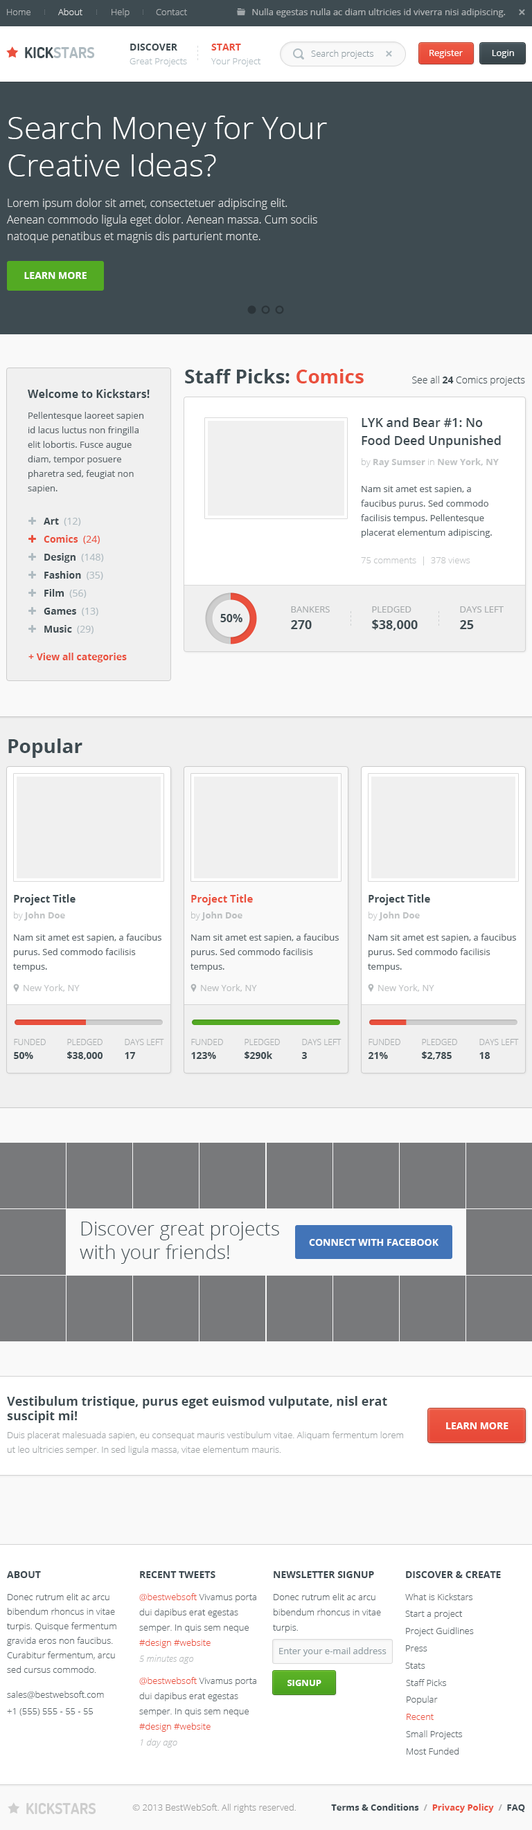
<style>
.page{position:relative;width:532px;height:1830px;background:#ffffff}
.page>*{position:absolute;margin:0}
.t1{font:9px "OpenSans-Light";color:#b0b4b6}
.t2{font:9px "OpenSans-Light";color:#e1e3e3}
.t3{font:9px "OpenSans";color:#b0b4b6}
.t4{font:15.2px "Dosis-Bold";color:#afbbc1;text-transform:uppercase}
.t5{font:15.2px "Dosis-Bold";color:#3e4b51;text-transform:uppercase}
.t6{font:9.7px "OpenSans-Bold";color:#3e4b51;text-transform:uppercase}
.t7{font:9.7px "OpenSans-Bold";color:#ea503d;text-transform:uppercase}
.t8{font:9px "OpenSans-Light";color:#909da3}
.t9{font:9px "OpenSans";color:#ffffff}
.t10{font:9px "OpenSans-Light";color:#afbbc1}
.t11{font:31.2px "OpenSans-Light";color:#ffffff}
.t12{font:11.1px/16.6px "OpenSans-Light";color:#e1e3e3}
.t13{font:9.7px "OpenSans-Bold";color:#ffffff;text-transform:uppercase}
.t14{font:19.4px "OpenSans-Bold";color:#3e4b51}
.t15{font:19.4px "OpenSans-Bold";color:#ea503d}
.t16{font:9.7px "OpenSans-Light";color:#3e4b51}
.t17{font:9.7px "OpenSans-Bold";color:#3e4b51}
.t18{font:11.1px "OpenSans-Bold";color:#3e4b51}
.t19{font:9px/14.5px "OpenSans";color:#5c666b}
.t20{font:12.5px/18px "OpenSans-Semibold";color:#3e4b51}
.t21{font:9px "OpenSans-Bold";color:#c1c4c5}
.t22{font:9px "OpenSans-Light";color:#c1c4c5}
.t23{font:9.7px "OpenSans";color:#afbbc1}
.t24{font:9.7px "OpenSans-Bold";color:#ea503d}
.t25{font:9.7px "OpenSans";color:#ea503d}
.t26{font:9px "OpenSans";color:#a6aaac;text-transform:uppercase}
.t27{font:12.5px "OpenSans-Bold";color:#3e4b51}
.t28{font:10.4px "OpenSans-Bold";color:#3e4b51}
.t29{font:10.4px "OpenSans-Bold";color:#ea503d}
.t30{font:9px "OpenSans-Bold";color:#bdc0c1}
.t31{font:9px "OpenSans-Light";color:#bdc0c1}
.t32{font:9px "OpenSans";color:#c1c4c5}
.t33{font:9px "OpenSans";color:#bdc0c1}
.t34{font:8.3px "OpenSans-Light";color:#a6aaac;text-transform:uppercase}
.t35{font:19.4px "OpenSans-Light";color:#3e4b51}
.t36{font:9px/14.5px "OpenSans-Light";color:#9da2a4}
.t37{font:9.7px "OpenSans-Bold";color:#3e4a51;text-transform:uppercase}
.t38{font:9px/14.5px "OpenSans-Light";color:#5c666b}
.t39{font:9px/15.2px "OpenSans-Light";color:#5c666b}
.t40{font:9px/15.2px "OpenSans-Light";color:#ea503d}
.t41{font:9px "OpenSans-Light";color:#5c666b}
.t42{font:9px "OpenSans";color:#909da3}
.t43{font:9px "OpenSansLight-Italic";color:#b9bcbe}
.t44{font:9px "OpenSans-Bold";color:#ffffff;text-transform:uppercase}
.t45{font:9px "OpenSans-Light";color:#ea503d}
.t46{font:15.2px "Dosis-Bold";color:#cecece;text-transform:uppercase}
.t47{font:9px "OpenSans-Light";color:#999999}
.t48{font:9px "OpenSans-Bold";color:#3e4a51}
.t49{font:9px "OpenSans-Bold";color:#aeaeae}
.t50{font:9px "OpenSans-Bold";color:#ea503d}
</style>
<div class="page">
<p class="t1" style="left:7px;top:9px;width:23px;height:6px">Home</p>
<p class="t2" style="left:58px;top:8px;width:24px;height:7px">About</p>
<p class="t1" style="left:111px;top:8px;width:18px;height:9px">Help</p>
<p class="t1" style="left:156px;top:9px;width:31px;height:6px">Contact</p>
<p class="t3" style="left:252px;top:8px;width:253px;height:9px">Nulla egestas nulla ac diam ultricies id viverra nisi adipiscing.</p>
<p class="t4" style="left:25px;top:47px;width:70px;height:11px"><span class="t5">Kick</span>stars</p>
<p class="t6" style="left:130px;top:44px;width:47px;height:7px">Discover</p>
<p class="t7" style="left:211px;top:44px;width:30px;height:7px">Start</p>
<p class="t8" style="left:311px;top:50px;width:62px;height:9px">Search projects</p>
<p class="t9" style="left:429px;top:50px;width:33px;height:8px">Register</p>
<p class="t9" style="left:492px;top:50px;width:22px;height:8px">Login</p>
<p class="t10" style="left:129px;top:58px;width:58px;height:8px">Great Projects</p>
<p class="t10" style="left:211px;top:58px;width:50px;height:8px">Your Project</p>
<p class="t11" style="left:8px;top:116px;width:319px;height:61px">Search Money for Your Creative Ideas?</p>
<p class="t12" style="left:7px;top:198px;width:310px;height:45px">Lorem ipsum dolor sit amet, consectetuer adipiscing elit. Aenean commodo ligula eget dolor. Aenean massa. Cum sociis natoque penatibus et magnis dis parturient monte.</p>
<p class="t13" style="left:24px;top:272px;width:63px;height:7px">Learn More</p>
<p class="t14" style="left:185px;top:369px;width:178px;height:15px">Staff Picks: <span class="t15">Comics</span></p>
<p class="t16" style="left:412px;top:376px;width:113px;height:10px">See all <span class="t17">24</span> Comics projects</p>
<p class="t18" style="left:28px;top:389px;width:122px;height:9px">Welcome to Kickstars!</p>
<p class="t19" style="left:28px;top:412px;width:116px;height:82px">Pellentesque laoreet sapien id lacus luctus non fringilla elit lobortis. Fusce augue diam, tempor posuere pharetra sed, feugiat non sapien.</p>
<p class="t20" style="left:361px;top:417px;width:140px;height:31px">LYK and Bear #1: No Food Deed Unpunished</p>
<p class="t21" style="left:361px;top:458px;width:137px;height:9px"><span class="t22">by </span>Ray Sumser<span class="t22"> in </span>New York, NY</p>
<p class="t19" style="left:361px;top:486px;width:131px;height:52px">Nam sit amet est sapien, a faucibus purus. Sed commodo facilisis tempus. Pellentesque placerat elementum adipiscing.</p>
<p class="t23" style="left:44px;top:518px;width:37px;height:8px"><span class="t17">Art </span> (12)</p>
<p class="t24" style="left:44px;top:535px;width:56px;height:9px">Comics <span class="t25"> (24)</span></p>
<p class="t17" style="left:44px;top:553px;width:60px;height:10px">Design <span class="t23"> (148)</span></p>
<p class="t22" style="left:361px;top:557px;width:109px;height:9px">75 comments  |  378 views</p>
<p class="t17" style="left:44px;top:571px;width:59px;height:9px">Fashion <span class="t23"> (35)</span></p>
<p class="t17" style="left:44px;top:589px;width:43px;height:9px">Film <span class="t23"> (56)</span></p>
<p class="t17" style="left:44px;top:608px;width:54px;height:8px">Games <span class="t23"> (13)</span></p>
<p class="t18" style="left:220px;top:614px;width:22px;height:8px">50%</p>
<p class="t26" style="left:291px;top:606px;width:39px;height:7px">Bankers</p>
<p class="t26" style="left:372px;top:606px;width:39px;height:7px">Pledged</p>
<p class="t26" style="left:460px;top:606px;width:43px;height:7px">Days Left</p>
<p class="t17" style="left:44px;top:625px;width:49px;height:9px">Music <span class="t23"> (29)</span></p>
<p class="t27" style="left:291px;top:620px;width:21px;height:9px">270</p>
<p class="t27" style="left:372px;top:620px;width:45px;height:11px">$38,000</p>
<p class="t27" style="left:460px;top:620px;width:14px;height:9px">25</p>
<p class="t24" style="left:28px;top:653px;width:99px;height:10px">+ View all categories</p>
<p class="t14" style="left:8px;top:739px;width:74px;height:19px">Popular</p>
<p class="t28" style="left:14px;top:894px;width:61px;height:12px">Project Title</p>
<p class="t29" style="left:191px;top:894px;width:62px;height:12px">Project Title</p>
<p class="t28" style="left:368px;top:894px;width:62px;height:12px">Project Title</p>
<p class="t21" style="left:14px;top:912px;width:51px;height:9px"><span class="t22">by </span>John Doe</p>
<p class="t30" style="left:191px;top:912px;width:51px;height:9px"><span class="t31">by </span>John Doe</p>
<p class="t21" style="left:368px;top:912px;width:52px;height:9px"><span class="t22">by </span>John Doe</p>
<p class="t19" style="left:13px;top:934px;width:148px;height:38px">Nam sit amet est sapien, a faucibus purus. Sed commodo facilisis tempus.</p>
<p class="t19" style="left:190px;top:934px;width:149px;height:38px">Nam sit amet est sapien, a faucibus purus. Sed commodo facilisis tempus.</p>
<p class="t19" style="left:368px;top:934px;width:148px;height:38px">Nam sit amet est sapien, a faucibus purus. Sed commodo facilisis tempus.</p>
<p class="t32" style="left:24px;top:984px;width:56px;height:8px">New York, NY</p>
<p class="t33" style="left:201px;top:984px;width:56px;height:8px">New York, NY</p>
<p class="t32" style="left:378px;top:984px;width:56px;height:8px">New York, NY</p>
<p class="t34" style="left:14px;top:1039px;width:32px;height:6px">Funded</p>
<p class="t34" style="left:67px;top:1039px;width:35px;height:6px">Pledged</p>
<p class="t34" style="left:125px;top:1039px;width:39px;height:6px">Days Left</p>
<p class="t34" style="left:191px;top:1039px;width:32px;height:6px">Funded</p>
<p class="t34" style="left:244px;top:1039px;width:36px;height:6px">Pledged</p>
<p class="t34" style="left:302px;top:1039px;width:39px;height:6px">Days Left</p>
<p class="t34" style="left:368px;top:1039px;width:32px;height:6px">Funded</p>
<p class="t34" style="left:422px;top:1039px;width:35px;height:6px">Pledged</p>
<p class="t34" style="left:479px;top:1039px;width:40px;height:6px">Days Left</p>
<p class="t17" style="left:14px;top:1052px;width:19px;height:7px">50%</p>
<p class="t17" style="left:67px;top:1052px;width:36px;height:8px">$38,000</p>
<p class="t17" style="left:125px;top:1052px;width:11px;height:7px">17</p>
<p class="t17" style="left:191px;top:1052px;width:25px;height:7px">123%</p>
<p class="t17" style="left:244px;top:1052px;width:28px;height:7px">$290k</p>
<p class="t17" style="left:301px;top:1052px;width:6px;height:7px">3</p>
<p class="t17" style="left:368px;top:1052px;width:20px;height:7px">21%</p>
<p class="t17" style="left:422px;top:1052px;width:29px;height:8px">$2,785</p>
<p class="t17" style="left:479px;top:1052px;width:11px;height:7px">18</p>
<p class="t35" style="left:80px;top:1222px;width:199px;height:42px">Discover great projects with your friends!</p>
<p class="t13" style="left:309px;top:1239px;width:129px;height:7px">Connect With Facebook</p>
<p class="t27" style="left:7px;top:1396px;width:380px;height:27px">Vestibulum tristique, purus eget euismod vulputate, nisl erat suscipit mi!</p>
<p class="t36" style="left:7px;top:1432px;width:396px;height:23px">Duis placerat malesuada sapien, eu consequat mauris vestibulum vitae. Aliquam fermentum lorem ut leo ultricies semper. In sed ligula massa, vitae elementum mauris.</p>
<p class="t13" style="left:446px;top:1423px;width:62px;height:7px">Learn More</p>
<p class="t37" style="left:7px;top:1572px;width:34px;height:6px">About</p>
<p class="t37" style="left:140px;top:1572px;width:75px;height:6px">Recent Tweets</p>
<p class="t37" style="left:273px;top:1572px;width:101px;height:6px">Newsletter Signup</p>
<p class="t37" style="left:406px;top:1572px;width:95px;height:6px">Discover &amp; Create</p>
<p class="t38" style="left:7px;top:1594px;width:109px;height:79px">Donec rutrum elit ac arcu bibendum rhoncus in vitae turpis. Quisque fermentum gravida eros non faucibus. Curabitur fermentum, arcu sed cursus commodo.</p>
<p class="t39" style="left:139px;top:1594px;width:117px;height:54px"><span class="t40">@bestwebsoft</span> Vivamus porta dui dapibus erat egestas semper. In quis sem neque <span class="t40">#design #website</span></p>
<p class="t39" style="left:273px;top:1594px;width:108px;height:39px">Donec rutrum elit ac arcu bibendum rhoncus in vitae turpis.</p>
<p class="t41" style="left:405px;top:1594px;width:67px;height:7px">What is Kickstars</p>
<p class="t41" style="left:405px;top:1611px;width:57px;height:8px">Start a project</p>
<p class="t41" style="left:406px;top:1628px;width:68px;height:9px">Project Guidlines</p>
<p class="t42" style="left:279px;top:1648px;width:107px;height:9px">Enter your e-mail address</p>
<p class="t41" style="left:406px;top:1646px;width:21px;height:6px">Press</p>
<p class="t43" style="left:139px;top:1655px;width:55px;height:9px">5 minutes ago</p>
<p class="t41" style="left:405px;top:1663px;width:20px;height:6px">Stats</p>
<p class="t39" style="left:139px;top:1677px;width:117px;height:55px"><span class="t40">@bestwebsoft</span> Vivamus porta dui dapibus erat egestas semper. In quis sem neque <span class="t40">#design #website</span></p>
<p class="t44" style="left:287px;top:1680px;width:34px;height:6px">Signup</p>
<p class="t41" style="left:406px;top:1680px;width:40px;height:6px">Staff Picks</p>
<p class="t41" style="left:7px;top:1691px;width:97px;height:8px">sales@bestwebsoft.com</p>
<p class="t41" style="left:406px;top:1696px;width:32px;height:9px">Popular</p>
<p class="t41" style="left:7px;top:1709px;width:86px;height:7px">+1 (555) 555 - 55 - 55</p>
<p class="t45" style="left:406px;top:1714px;width:27px;height:6px">Recent</p>
<p class="t41" style="left:406px;top:1731px;width:56px;height:9px">Small Projects</p>
<p class="t43" style="left:141px;top:1739px;width:36px;height:9px">1 day ago</p>
<p class="t41" style="left:406px;top:1748px;width:52px;height:7px">Most Funded</p>
<p class="t46" style="left:26px;top:1803px;width:70px;height:12px">Kickstars</p>
<p class="t47" style="left:132px;top:1804px;width:164px;height:9px">© 2013 BestWebSoft. All rights reserved.</p>
<p class="t48" style="left:331px;top:1804px;width:194px;height:9px">Terms &amp; Conditions <span class="t49"> /  </span><span class="t50">Privacy Policy  </span><span class="t49">/</span>  FAQ</p>
</div>
